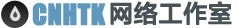
<style>
.page{position:relative;width:239px;height:28px;background:#ffffff}
.page>*{position:absolute;margin:0}
.t1{font:26.4px "Impact";color:#5f98bd;font-weight:bold}
.t2{font:24.1px "FZLTZHK--GBK1-0";color:#485155;font-weight:bold}
</style>
<div class="page">
<p class="t1" style="left:32px;top:3px;width:74px;height:23px">CNHTK</p>
<p class="t2" style="left:110px;top:1px;width:122px;height:24px">网络工作室</p>
</div>
